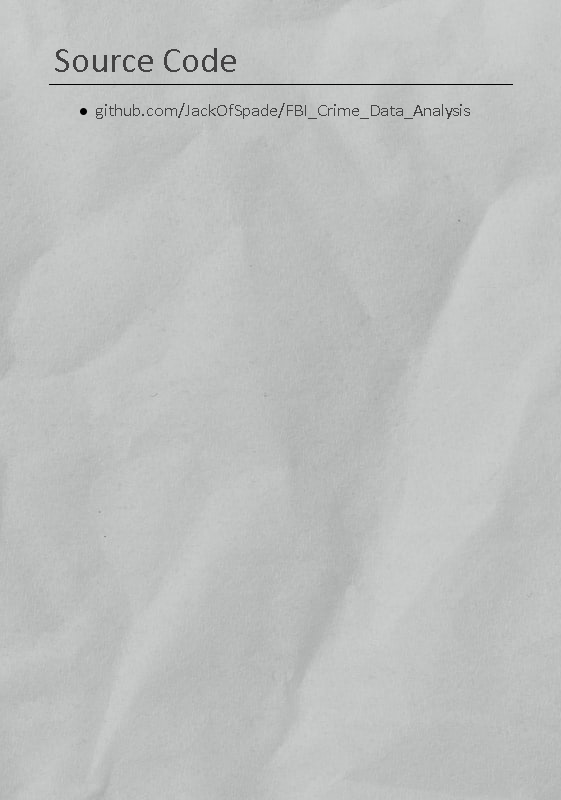
<style>
.page{position:relative;width:561px;height:800px}
.page>*{position:absolute;margin:0}
.t1{font:36px "Calibri";color:#434343}
.t2{font:18px "Calibri";color:#434343}
</style>
<div class="page">
<p class="t1" style="left:55px;top:48px;width:181px;height:24px">Source Code</p>
<p class="t2" style="left:96px;top:103px;width:374px;height:16px">github.com/JackOfSpade/FBI_Crime_Data_Analysis</p>
</div>
